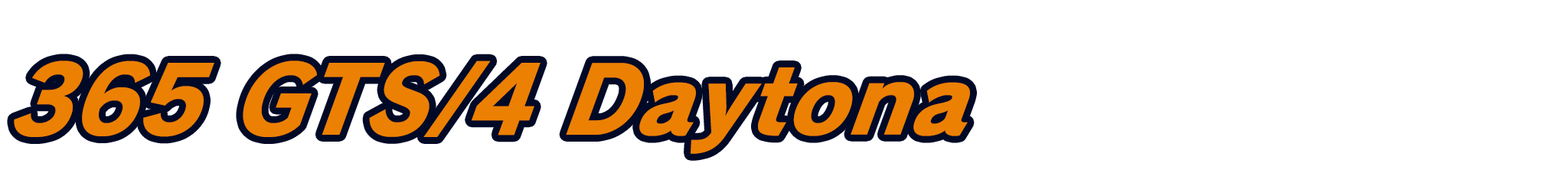
<style>
.page{position:relative;width:1568px;height:196px;background:#ffffff}
.page>*{position:absolute;margin:0}
.t1{font:98px "RodinPro-EB";letter-spacing:0.001em;color:#ec8002;scale:0.94 1}
</style>
<div class="page">
<p class="t1" style="left:14px;top:60px;width:956px;height:94px">365 GTS/4 Daytona</p>
</div>
